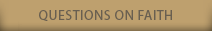
<style>
.page{position:relative;width:212px;height:31px;background:#bea06e}
.page>*{position:absolute;margin:0}
.t1{font:13.5px "MyriadPro-Regular";letter-spacing:0.05em;color:#695f50;text-transform:uppercase}
</style>
<div class="page">
<p class="t1" style="left:39px;top:10px;width:133px;height:11px">Questions on Faith</p>
</div>
